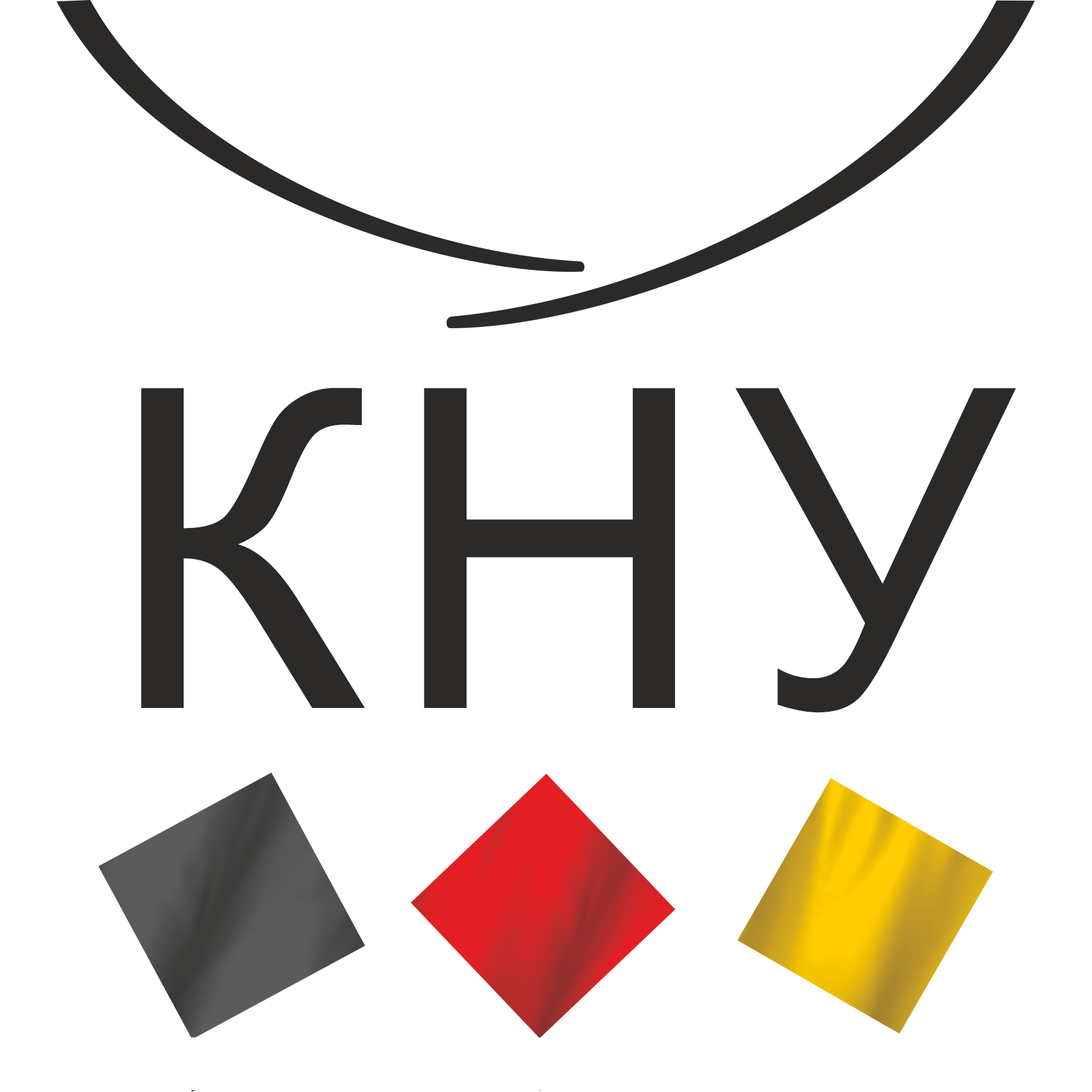
<style>
.page{position:relative;width:1092px;height:1092px;background:#ffffff}
.page>*{position:absolute;margin:0}
.t1{font:446.7px "ArialMT";letter-spacing:0.05em;color:#2b2a29}
</style>
<div class="page">
<p class="t1" style="left:141px;top:388px;width:875px;height:325px">КНУ</p>
</div>
